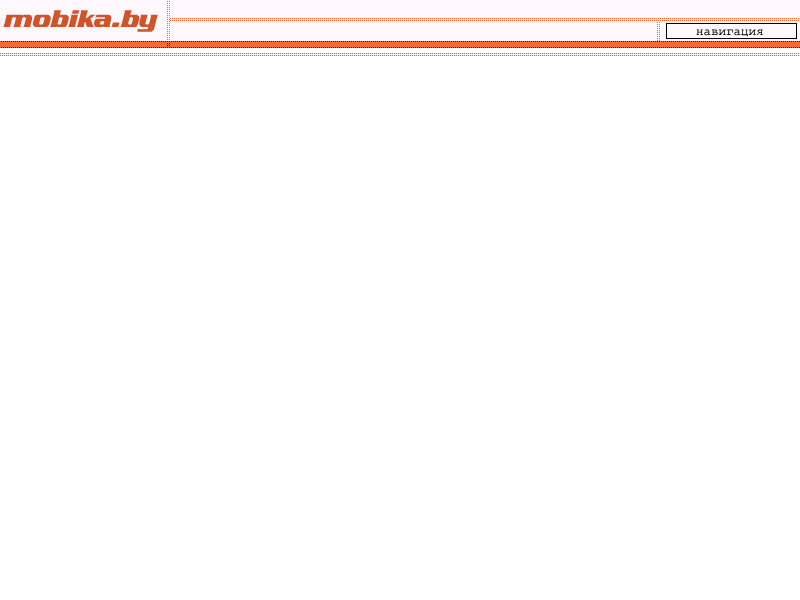
<style>
.page{position:relative;width:800px;height:600px;background:#ffffff}
.page>*{position:absolute;margin:0}
.t1{font:25px "SerpentineDEE-BoldItal";color:#d1532a}
.t2{font:12.5px "CourierNewPSMT";color:#000000}
</style>
<div class="page">
<p class="t1" style="left:3px;top:10px;width:155px;height:22px">mobika.by</p>
<p class="t2" style="left:696px;top:29px;width:67px;height:8px">навигация</p>
</div>
